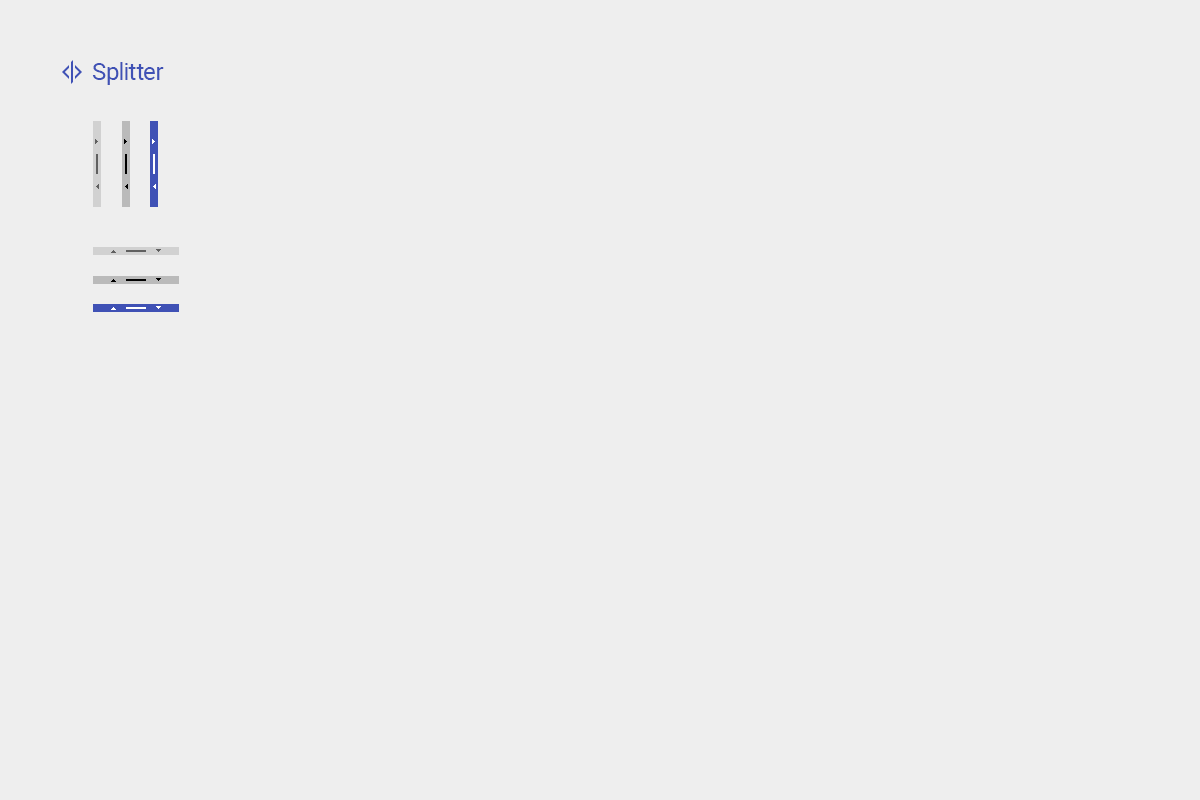
<style>
.page{position:relative;width:1200px;height:800px;background:#eeeeee}
.page>*{position:absolute;margin:0}
.t1{font:24px "Roboto-Regular";letter-spacing:-0.025em;color:#3f51b5}
</style>
<div class="page">
<p class="t1" style="left:92px;top:62px;width:72px;height:23px">Splitter</p>
</div>
